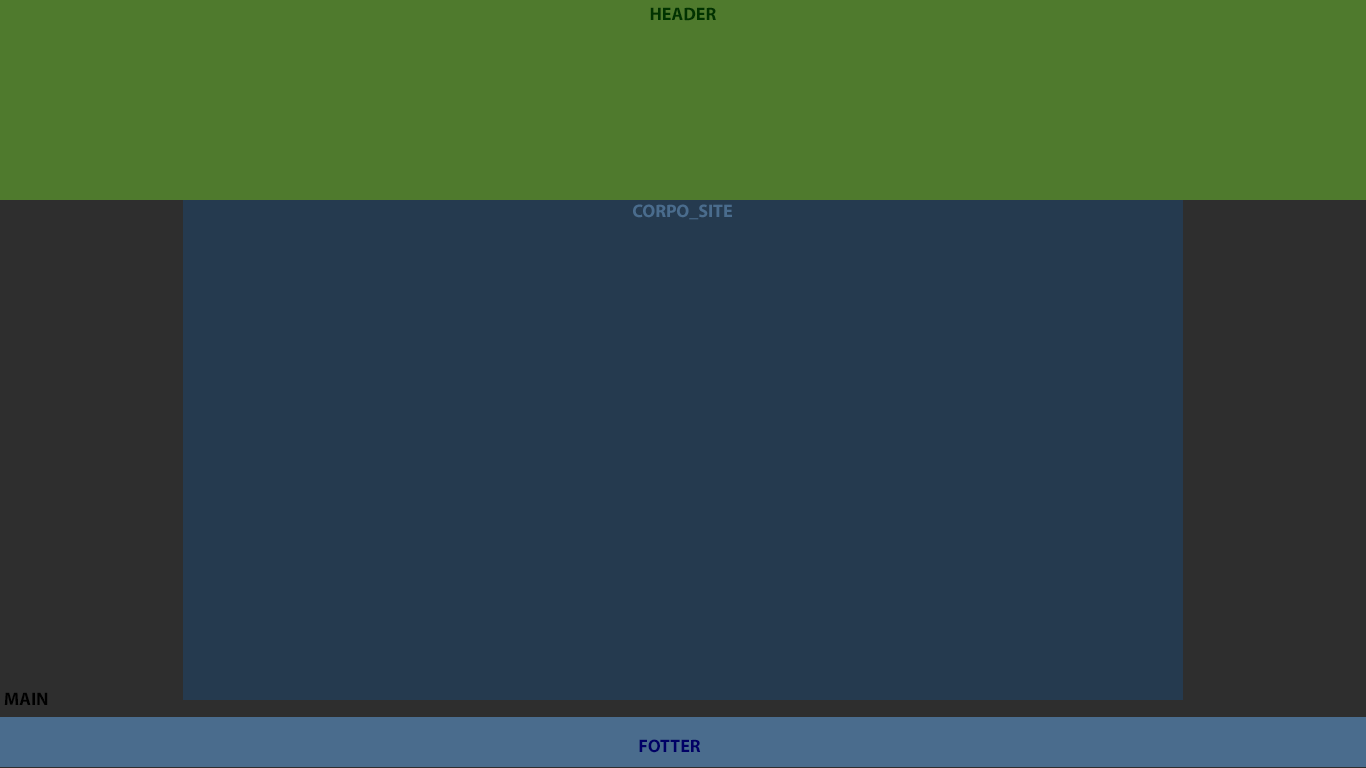
<style>
.page{position:relative;width:1366px;height:768px;background:#253a4f}
.page>*{position:absolute;margin:0}
.t1{font:18px "MyriadPro-Bold";color:#003300;text-transform:uppercase}
.t2{font:18px "MyriadPro-Bold";color:#4a6c8d;text-transform:uppercase}
.t3{font:18px "MyriadPro-Bold";color:#000000;text-transform:uppercase}
.t4{font:18px "MyriadPro-Bold";color:#000066;text-transform:uppercase}
</style>
<div class="page">
<p class="t1" style="left:650px;top:7px;width:66px;height:14px">header</p>
<p class="t2" style="left:633px;top:204px;width:99px;height:16px">corpo_site</p>
<p class="t3" style="left:4px;top:692px;width:44px;height:13px">main</p>
<p class="t4" style="left:639px;top:739px;width:62px;height:14px">fotter</p>
</div>
